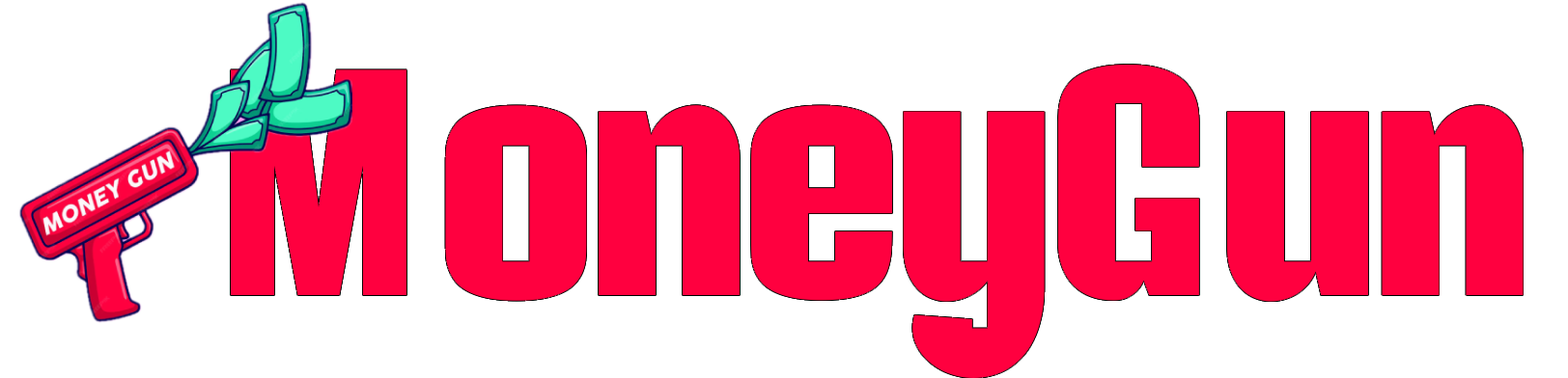
<style>
.page{position:relative;width:1568px;height:378px;background:#ffffff}
.page>*{position:absolute;margin:0}
.t1{font:289.7px "CodaCaption-ExtraBold";letter-spacing:-0.067em;color:#ff003f;scale:0.81 1}
</style>
<div class="page">
<p class="t1" style="left:231px;top:64px;width:1293px;height:314px">MoneyGun</p>
</div>
